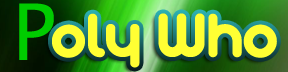
<style>
.page{position:relative;width:288px;height:72px;background:#ffff33}
.page>*{position:absolute;margin:0}
.t1{font:78px "LucidaGrande";color:#00cc00}
.t2{font:68px "Arista";color:#ffff33}
</style>
<div class="page">
<p class="t1" style="left:19px;top:3px;width:35px;height:57px">P</p>
<p class="t2" style="left:52px;top:13px;width:225px;height:55px">oly Who</p>
</div>
